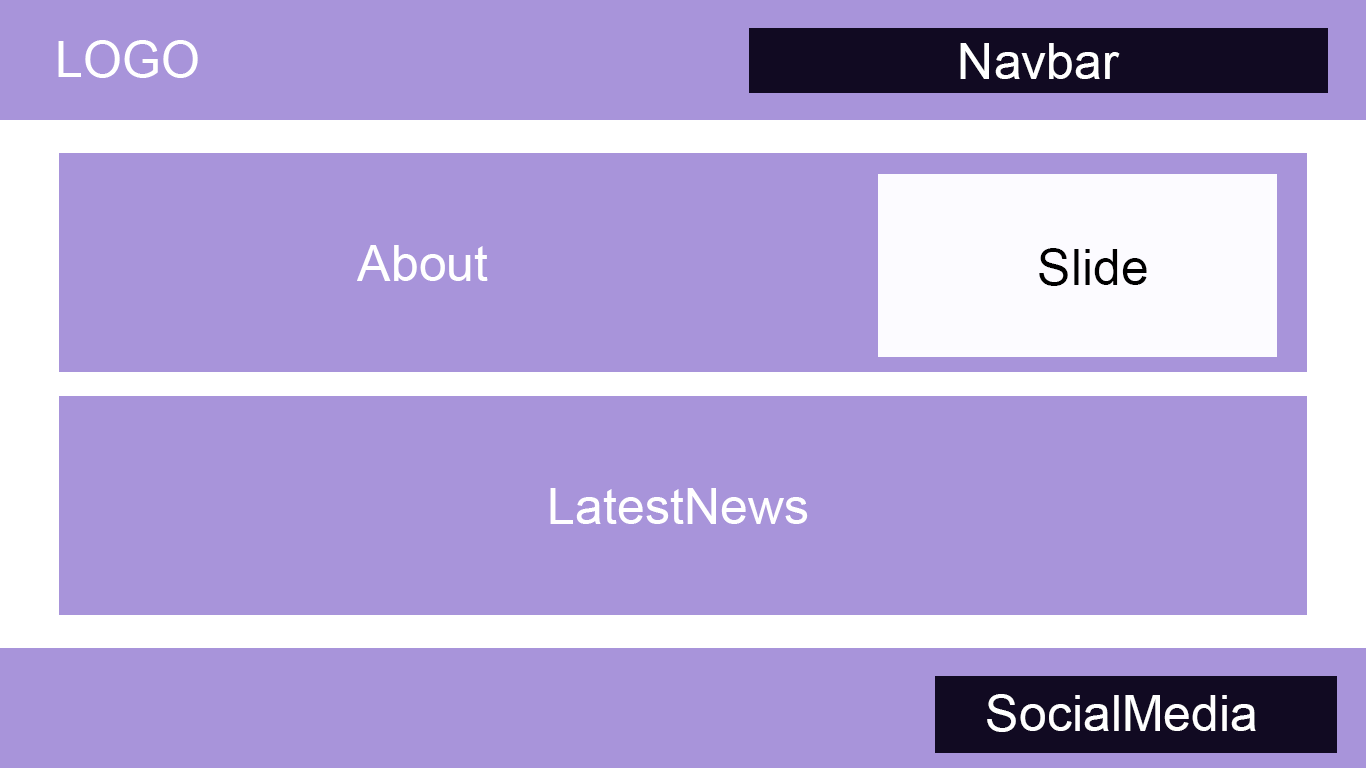
<style>
.page{position:relative;width:1366px;height:768px;background:#a894da}
.page>*{position:absolute;margin:0}
.t1{font:50px "ArialMT";color:#ffffff}
.t2{font:50px "ArialMT";color:#000000}
</style>
<div class="page">
<p class="t1" style="left:58px;top:40px;width:140px;height:38px">LOGO</p>
<p class="t1" style="left:960px;top:43px;width:160px;height:36px">Navbar</p>
<p class="t1" style="left:357px;top:245px;width:131px;height:36px">About</p>
<p class="t2" style="left:1039px;top:248px;width:108px;height:38px">Slide</p>
<p class="t1" style="left:550px;top:488px;width:258px;height:36px">LatestNews</p>
<p class="t1" style="left:987px;top:694px;width:269px;height:38px">SocialMedia</p>
</div>
